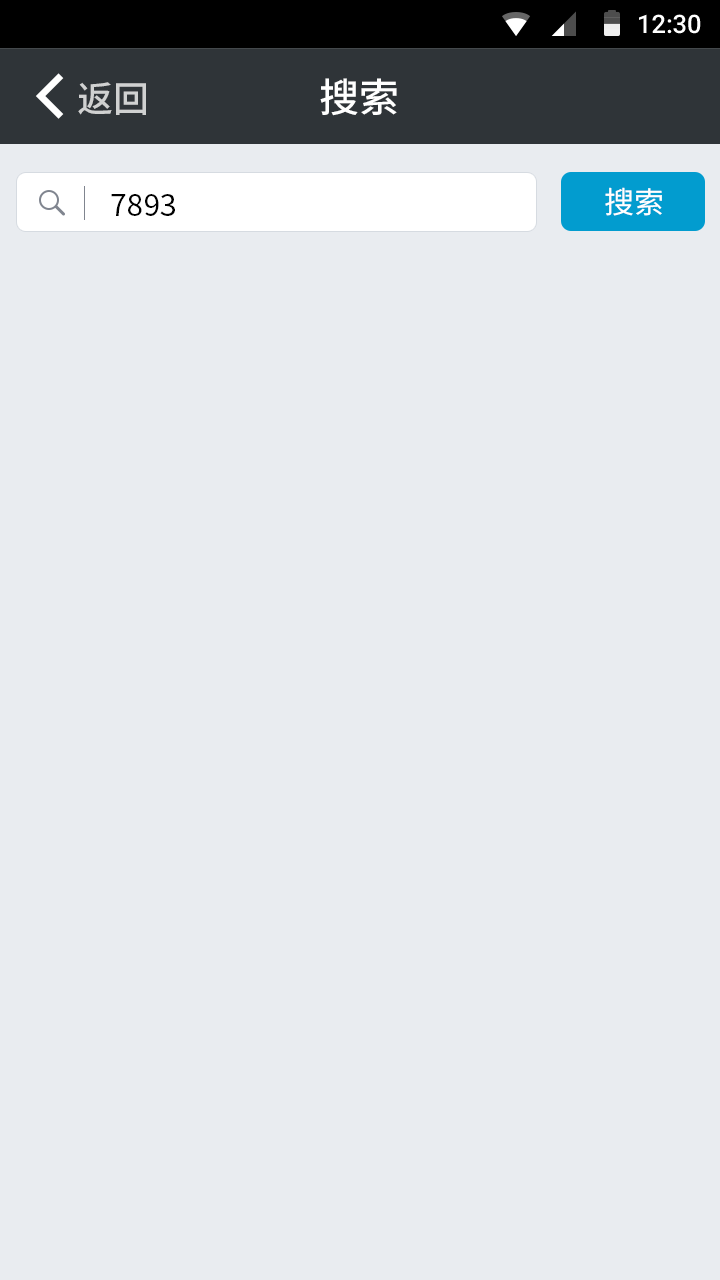
<style>
.page{position:relative;width:720px;height:1280px;background:#e9ecf0}
.page>*{position:absolute;margin:0}
.t1{font:25.4px "Roboto-Medium";color:#ffffff}
.t2{font:40px "SourceHanSansCN-Medium";color:#ffffff}
.t3{font:36px "SourceHanSansCN-Medium";color:#d0d1d1}
.t4{font:30px "SourceHanSansCN-Regular";color:#000000}
.t5{font:30px "SourceHanSansCN-Regular";color:#ffffff}
</style>
<div class="page">
<p class="t1" style="left:639px;top:14px;width:62px;height:20px">12:30</p>
<p class="t2" style="left:320px;top:78px;width:77px;height:38px">搜索</p>
<p class="t3" style="left:78px;top:82px;width:68px;height:33px">返回</p>
<p class="t4" style="left:111px;top:194px;width:64px;height:22px">7893</p>
<p class="t5" style="left:605px;top:187px;width:57px;height:29px">搜索</p>
</div>
